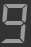
<style>
.page{position:relative;width:31px;height:47px;background:#333333}
.page>*{position:absolute;margin:0}
.t1{font:62px "DS-Digital-Italic";color:#9a9a9a}
</style>
<div class="page">
<p class="t1" style="left:1px;top:4px;width:27px;height:39px">9</p>
</div>
